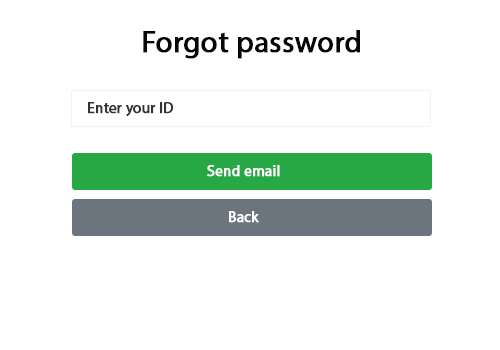
<style>
.page{position:relative;width:500px;height:350px;background:#ffffff}
.page>*{position:absolute;margin:0}
.t1{font:30px "MyriadPro-Regular";color:#060606;font-weight:bold}
.t2{font:15px "MyriadPro-Regular";color:#333333;font-weight:bold}
.t3{font:15px "MyriadPro-Regular";color:#ffffff;font-weight:bold}
</style>
<div class="page">
<p class="t1" style="left:143px;top:30px;width:217px;height:29px">Forgot password</p>
<p class="t2" style="left:88px;top:102px;width:86px;height:15px">Enter your ID</p>
<p class="t3" style="left:207px;top:165px;width:73px;height:12px">Send email</p>
<p class="t3" style="left:229px;top:211px;width:30px;height:12px">Back</p>
</div>
